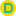
<style>
.page{position:relative;width:16px;height:16px;background:#ead518}
.page>*{position:absolute;margin:0}
.t1{font:12px "Track";color:#2bb673}
</style>
<div class="page">
<p class="t1" style="left:4px;top:3px;width:9px;height:10px">D</p>
</div>
